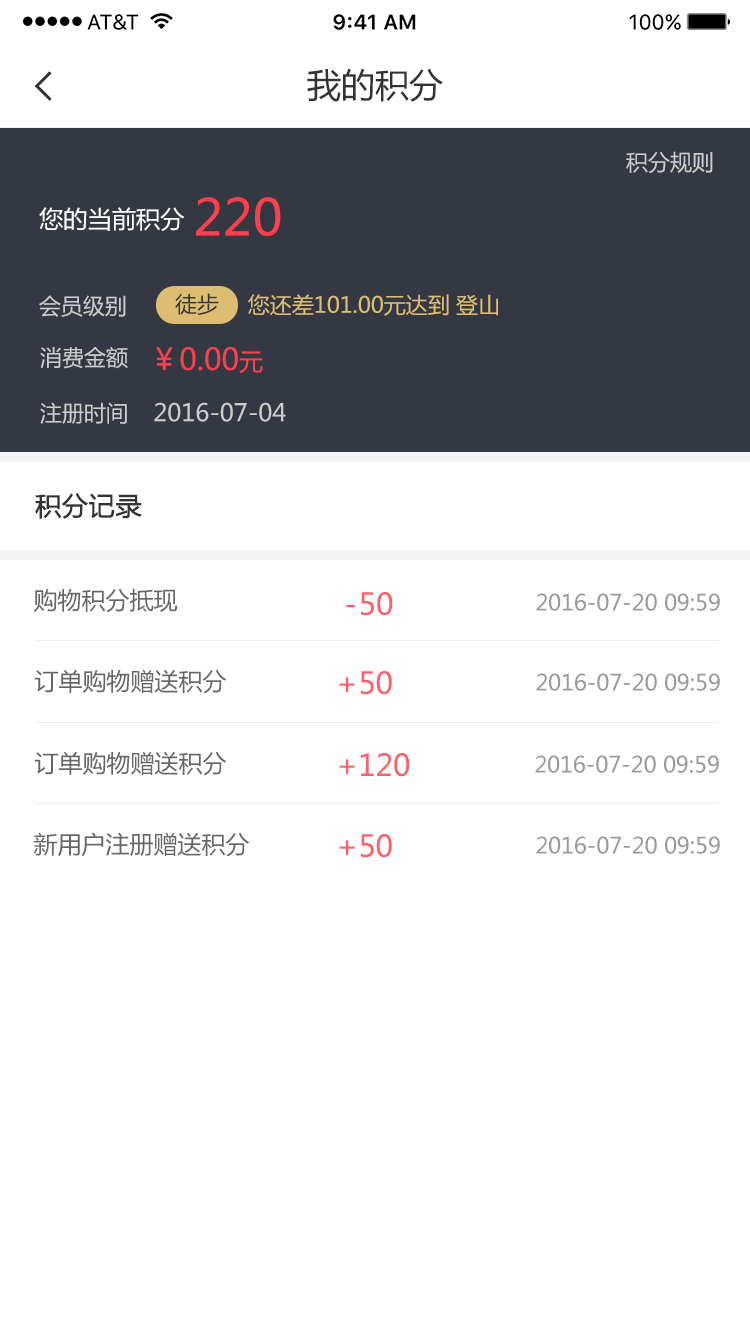
<style>
.page{position:relative;width:750px;height:1334px;background:#ffffff}
.page>*{position:absolute;margin:0}
.t1{font:34px "MicrosoftYaHei";color:#333333}
.t2{font:22px "MicrosoftYaHei";color:#cccccc}
.t3{font:50px "MicrosoftYaHei";color:#fe404c}
.t4{font:24px "MicrosoftYaHei";color:#ffffff}
.t5{font:22px "MicrosoftYaHei";color:#333333}
.t6{font:22px "MicrosoftYaHei";color:#ddbe72}
.t7{font:30px "MicrosoftYaHei";color:#fe404c}
.t8{font:24px "MicrosoftYaHei";color:#fe404c}
.t9{font:24px "MicrosoftYaHei";color:#cccccc}
.t10{font:26px "MicrosoftYaHei";color:#333333;font-weight:bold}
.t11{font:24px "MicrosoftYaHei";color:#666666}
.t12{font:30px "MicrosoftYaHei";color:#ff5f69}
.t13{font:22px "MicrosoftYaHei";color:#999999}
</style>
<div class="page">
<p class="t1" style="left:307px;top:68px;width:136px;height:34px">我的积分</p>
<p class="t2" style="left:626px;top:151px;width:87px;height:23px">积分规则</p>
<p class="t3" style="left:196px;top:197px;width:85px;height:39px">220</p>
<p class="t4" style="left:39px;top:207px;width:146px;height:24px">您的当前积分</p>
<p class="t5" style="left:175px;top:293px;width:44px;height:22px">徒步</p>
<p class="t6" style="left:248px;top:294px;width:250px;height:22px">您还差101.00元达到 登山</p>
<p class="t2" style="left:39px;top:295px;width:87px;height:22px">会员级别</p>
<p class="t2" style="left:40px;top:347px;width:88px;height:22px">消费金额</p>
<p class="t7" style="left:156px;top:347px;width:107px;height:26px">￥0.00<span class="t8">元</span></p>
<p class="t2" style="left:40px;top:402px;width:87px;height:22px">注册时间</p>
<p class="t9" style="left:154px;top:402px;width:132px;height:20px">2016-07-04</p>
<p class="t10" style="left:35px;top:493px;width:107px;height:26px">积分记录</p>
<p class="t11" style="left:33px;top:588px;width:145px;height:25px">购物积分抵现</p>
<p class="t12" style="left:346px;top:592px;width:47px;height:24px">- 50</p>
<p class="t13" style="left:536px;top:593px;width:184px;height:18px">2016-07-20 09:59</p>
<p class="t11" style="left:34px;top:669px;width:193px;height:25px">订单购物赠送积分</p>
<p class="t12" style="left:339px;top:671px;width:53px;height:24px">+50</p>
<p class="t13" style="left:536px;top:673px;width:184px;height:18px">2016-07-20 09:59</p>
<p class="t11" style="left:34px;top:751px;width:193px;height:25px">订单购物赠送积分</p>
<p class="t12" style="left:339px;top:753px;width:71px;height:24px">+120</p>
<p class="t13" style="left:535px;top:755px;width:184px;height:18px">2016-07-20 09:59</p>
<p class="t11" style="left:33px;top:832px;width:217px;height:25px">新用户注册赠送积分</p>
<p class="t12" style="left:339px;top:834px;width:53px;height:24px">+50</p>
<p class="t13" style="left:536px;top:836px;width:184px;height:18px">2016-07-20 09:59</p>
</div>
